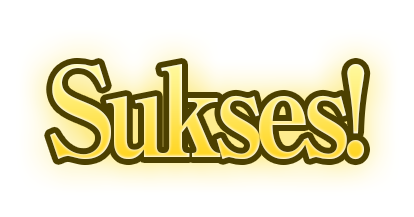
<style>
.page{position:relative;width:414px;height:217px;background:#ffffff}
.page>*{position:absolute;margin:0}
.t1{font:125px "RyuminPro-ExBold";letter-spacing:-0.08em;scale:0.9 1}
</style>
<div class="page">
<p class="t1" style="left:50px;top:64px;width:315px;height:96px">Sukses!</p>
</div>
